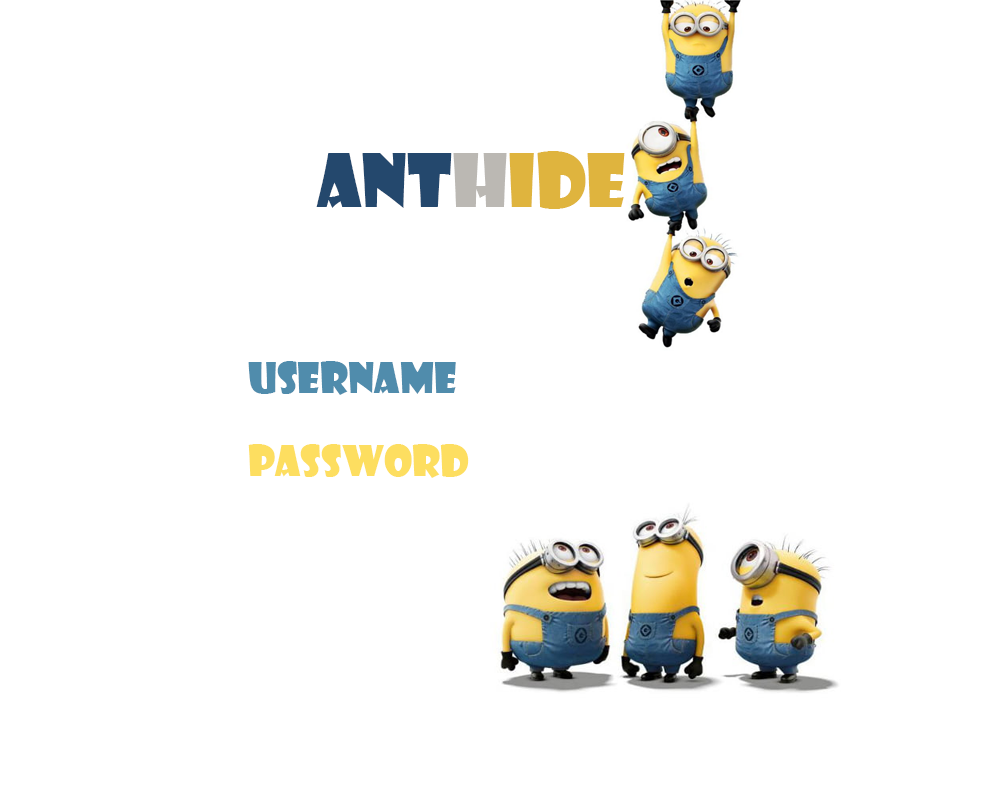
<style>
.page{position:relative;width:1000px;height:800px;background:#ffffff}
.page>*{position:absolute;margin:0}
.t1{font:72px "ShowcardGothic-Reg";color:#24486d}
.t2{font:72px "ShowcardGothic-Reg";color:#bbb8b3}
.t3{font:72px "ShowcardGothic-Reg";color:#dfb43e}
.t4{font:41px "ShowcardGothic-Reg";color:#508cac}
.t5{font:41px "ShowcardGothic-Reg";color:#fdde60}
</style>
<div class="page">
<p class="t1" style="left:316px;top:151px;width:309px;height:58px">Ant<span class="t2">H</span><span class="t3">ide</span></p>
<p class="t4" style="left:248px;top:361px;width:208px;height:34px">Username</p>
<p class="t5" style="left:248px;top:444px;width:221px;height:34px">Password</p>
</div>
